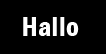
<style>
.page{position:relative;width:106px;height:54px;background:#000000}
.page>*{position:absolute;margin:0}
.t1{font:27.6px "FranklinGothic-DemiCond";letter-spacing:0.02em;color:#fefefe}
</style>
<div class="page">
<p class="t1" style="left:23px;top:17px;width:56px;height:19px">Hallo</p>
</div>
